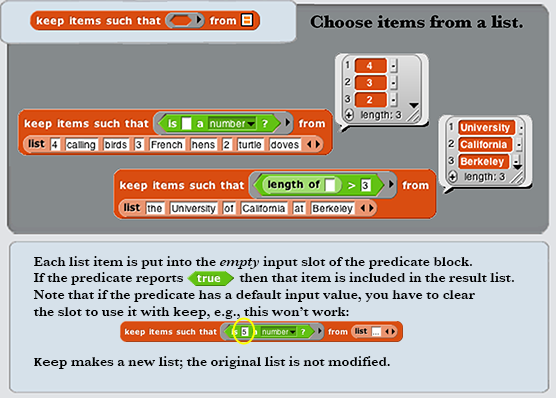
<style>
.page{position:relative;width:556px;height:398px;background:#d6e1ea}
.page>*{position:absolute;margin:0}
.t1{font:14px "Baskerville-SemiBold";color:#000000}
.t2{font:14px "Baskerville-SemiBoldItalic";color:#000000}
.t3{font:14px "CourierCE-Bold";color:#000000}
</style>
<div class="page">
<p class="t1" style="left:33px;top:256px;width:481px;height:113px">Each list item is put into the <span class="t2">empty </span>input slot of the predicate block.<br>If the predicate reports                then that item is included in the result list.<br>Note that if the predicate has a default input value, you have to clear<br>the slot to use it with <span class="t3">keep</span>, e.g., this won’t work:<br><br><br><span class="t3">Keep</span> makes a new list; the original list is not modified.</p>
</div>
